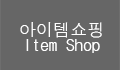
<style>
.page{position:relative;width:120px;height:70px;background:#666666}
.page>*{position:absolute;margin:0}
.t1{font:17.1px/15.4px "DotumChe";color:#ffffff}
</style>
<div class="page">
<p class="t1" style="left:20px;top:22px;width:82px;height:31px;text-align:center">아이템쇼핑<br>Item Shop</p>
</div>
